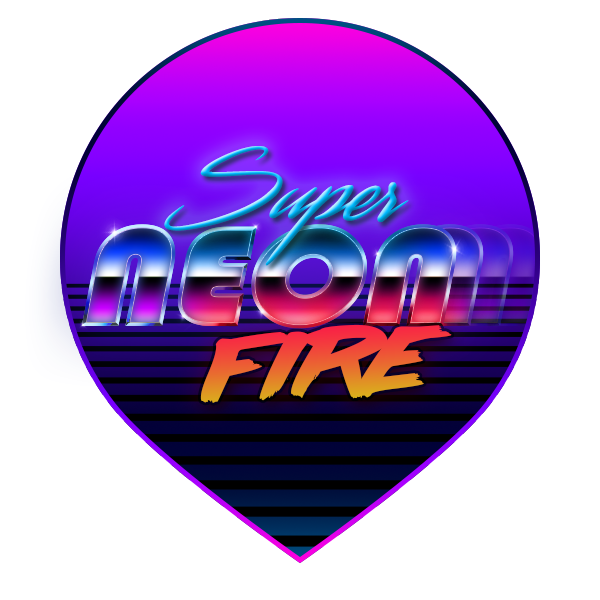
<style>
.page{position:relative;width:600px;height:600px;background:#ffffff}
.page>*{position:absolute;margin:0}
.t1{font:88px "Streamster";scale:1.18 1}
.t2{font:80.7px "lazer84";scale:1.26 1}
</style>
<div class="page">
<p class="t1" style="left:164px;top:146px;width:245px;height:120px">Super</p>
<p class="t2" style="left:200px;top:324px;width:252px;height:79px;rotate:-2deg">Fire</p>
</div>
